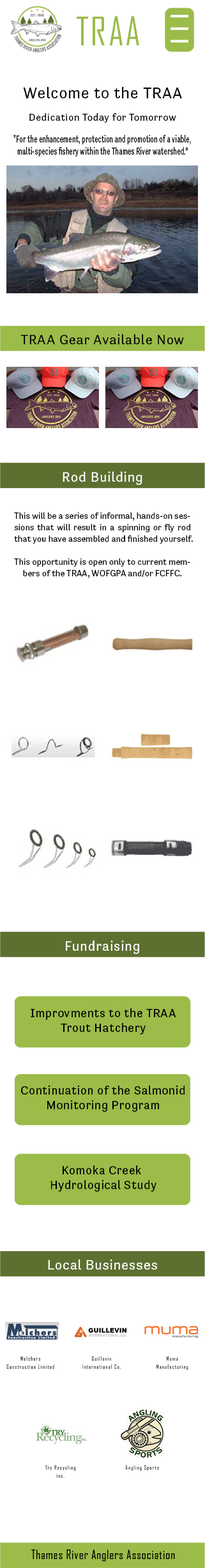
<style>
.page{position:relative;width:205px;height:1568px;background:#ffffff}
.page>*{position:absolute;margin:0}
.t1{font:38px "AgencyFB-Regular";letter-spacing:0.038em;color:#9bbc49}
.t2{font:16px "Tenso-Regular";letter-spacing:0.038em;color:#000000}
.t3{font:10.2px "Tenso-Regular";letter-spacing:0.038em;color:#000000}
.t4{font:10.4px "Tenso-Regular";letter-spacing:0.038em;color:#000000;scale:0.61 1}
.t5{font:14.1px "Tenso-Regular";letter-spacing:0.038em;color:#000000}
.t6{font:14.1px "Tenso-Regular";letter-spacing:0.038em;color:#ffffff}
.t7{font:8.9px/11.5px "Tenso-Regular";color:#000000}
.t8{font:12.1px "Tenso-Regular";letter-spacing:0.038em;color:#000000}
.t9{font:12.1px "AgencyFB-Regular";letter-spacing:0.038em;color:#000000}
</style>
<div class="page">
<p class="t1" style="left:77px;top:16px;width:62px;height:29px">TRAA</p>
<p class="t2" style="left:23px;top:87px;width:159px;height:11px">Welcome to the TRAA</p>
<p class="t3" style="left:29px;top:113px;width:147px;height:10px">Dedication Today for Tomorrow</p>
<p class="t4" style="left:13px;top:135px;width:178px;height:22px;text-align:center">"For the enhancement, protection and promotion of a viable,<br>multi-species fishery within the Thames River watershed.”</p>
<p class="t5" style="left:20px;top:334px;width:164px;height:10px">TRAA Gear Available Now</p>
<p class="t6" style="left:63px;top:472px;width:79px;height:13px">Rod Building</p>
<p class="t7" style="left:14px;top:512px;width:179px;height:66px;text-align:justify">This will be a series of informal, hands-on sessions that will result in a spinning or fly rod that you have assembled and finished yourself.<br><br>This opportunity is open only to current members of the TRAA, WOFGPA and/or FCFFC.</p>
<p class="t6" style="left:66px;top:941px;width:73px;height:13px">Fundraising</p>
<p class="t8" style="left:31px;top:1008px;width:145px;height:26px;text-align:center">Improvments to the TRAA<br>Trout Hatchery</p>
<p class="t8" style="left:21px;top:1086px;width:164px;height:26px;text-align:center">Continuation of the Salmonid<br>Monitoring Program</p>
<p class="t8" style="left:51px;top:1165px;width:106px;height:27px;text-align:center">Komoka Creek <br>Hydrological Study</p>
<p class="t6" style="left:48px;top:1259px;width:109px;height:11px">Local Businesses</p>
<p class="t9" style="left:31px;top:1549px;width:144px;height:13px">Thames River Anglers Association</p>
</div>
